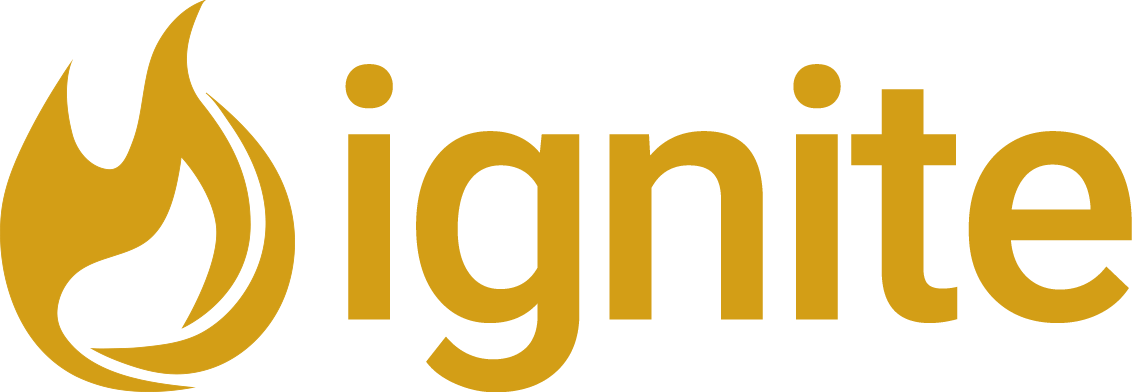
<style>
.page{position:relative;width:1132px;height:392px;background:#ffffff}
.page>*{position:absolute;margin:0}
.t1{font:350px "Roboto-Medium";letter-spacing:-0.033em;color:#d39e16}
</style>
<div class="page">
<p class="t1" style="left:345px;top:64px;width:787px;height:329px">ignite</p>
</div>
